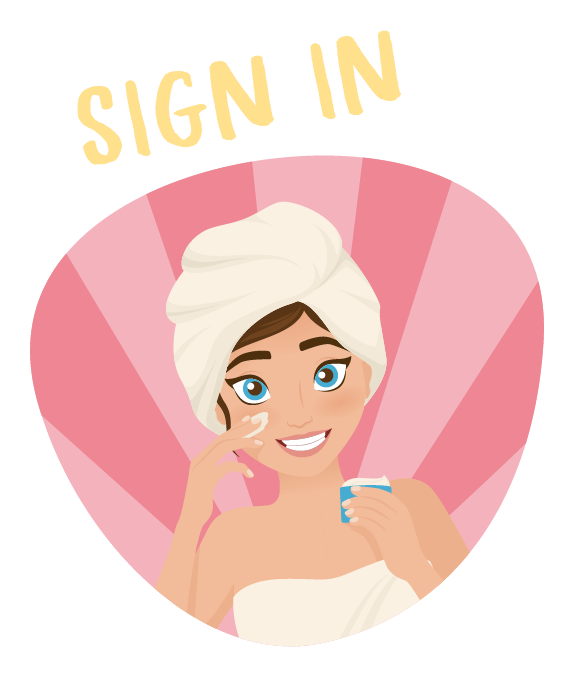
<style>
.page{position:relative;width:577px;height:676px;background:#ffffff}
.page>*{position:absolute;margin:0}
.t1{font:200px "AhoyAmigoDEMO-Regular";color:#ffe08c}
</style>
<div class="page">
<p class="t1" style="left:77px;top:30px;width:324px;height:135px;rotate:-11deg">SIGN IN</p>
</div>
